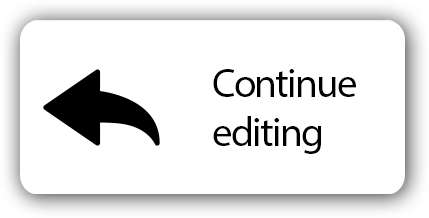
<style>
.page{position:relative;width:429px;height:218px;background:#ffffff}
.page>*{position:absolute;margin:0}
.t1{font:41px "MyriadPro-Regular";letter-spacing:-0.04em;color:#000000}
</style>
<div class="page">
<p class="t1" style="left:213px;top:69px;width:143px;height:85px">Continue<br>editing</p>
</div>
